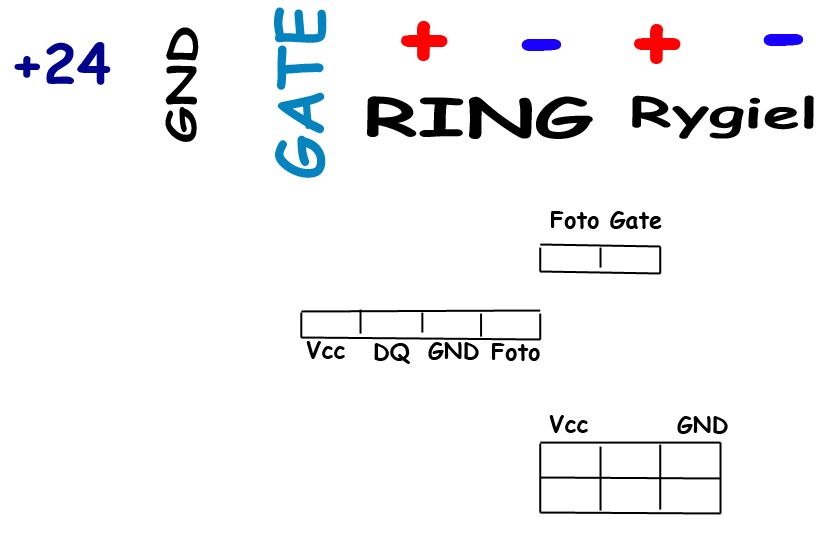
<style>
.page{position:relative;width:840px;height:550px;background:#ffffff}
.page>*{position:absolute;margin:0}
.t1{font:63.1px "ComicSansMS-Bold";color:#0483be}
.t2{font:39.3px "ComicSansMS-Bold";color:#000000;scale:1.34 1}
.t3{font:100.5px "ComicSansMS-Bold";color:#ff0101}
.t4{font:100.5px "ComicSansMS-Bold";color:#1800ff}
.t5{font:54.9px "ComicSansMS-Bold";color:#00038c}
.t6{font:53px "ComicSansMS-Bold";color:#000000;scale:1.62 1}
.t7{font:41.4px "ComicSansMS-Bold";color:#000000;scale:1.62 1}
.t8{font:23.3px "ComicSansMS-Bold";color:#000000}
</style>
<div class="page">
<p class="t1" style="left:274px;top:7px;width:53px;height:171px;rotate:-90deg">GATE</p>
<p class="t2" style="left:165px;top:27px;width:34px;height:115px;rotate:-89deg">GND</p>
<p class="t3" style="left:401px;top:21px;width:47px;height:40px">+</p>
<p class="t3" style="left:634px;top:24px;width:47px;height:40px">+</p>
<p class="t4" style="left:521px;top:39px;width:41px;height:12px">-</p>
<p class="t4" style="left:763px;top:34px;width:41px;height:12px">-</p>
<p class="t5" style="left:14px;top:42px;width:97px;height:43px">+24</p>
<p class="t6" style="left:367px;top:96px;width:226px;height:43px;rotate:1deg">RING</p>
<p class="t7" style="left:632px;top:95px;width:182px;height:44px;rotate:1deg">Rygiel</p>
<p class="t8" style="left:551px;top:211px;width:111px;height:18px">Foto Gate</p>
<p class="t8" style="left:306px;top:341px;width:39px;height:18px">Vcc</p>
<p class="t8" style="left:428px;top:342px;width:51px;height:18px">GND</p>
<p class="t8" style="left:374px;top:343px;width:36px;height:21px">DQ</p>
<p class="t8" style="left:492px;top:343px;width:48px;height:18px">Foto</p>
<p class="t8" style="left:549px;top:415px;width:39px;height:18px">Vcc</p>
<p class="t8" style="left:677px;top:416px;width:51px;height:18px">GND</p>
</div>
